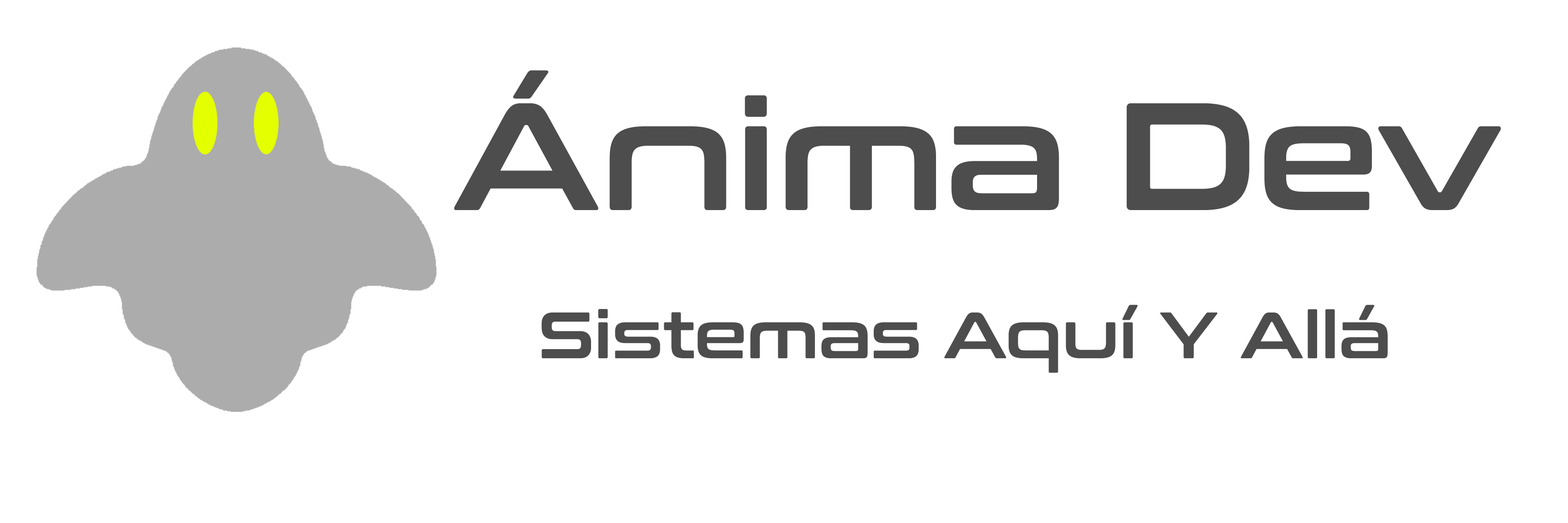
<style>
.page{position:relative;width:1568px;height:523px;background:#ffffff}
.page>*{position:absolute;margin:0}
.t1{font:152.4px "ConthraxSb-Regular";color:#4d4d4d}
.t2{font:65.3px "ConthraxSb-Regular";color:#4d4d4d}
</style>
<div class="page">
<p class="t1" style="left:454px;top:70px;width:1047px;height:140px">Ánima Dev</p>
<p class="t2" style="left:541px;top:304px;width:847px;height:69px">Sistemas Aquí Y Allá</p>
</div>
